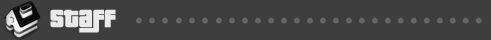
<style>
.page{position:relative;width:491px;height:40px;background:#3e3e3e}
.page>*{position:absolute;margin:0}
.t1{font:27px "PricedownBl-Regular";color:#eaeaea}
</style>
<div class="page">
<p class="t1" style="left:50px;top:9px;width:66px;height:24px">staff</p>
</div>
